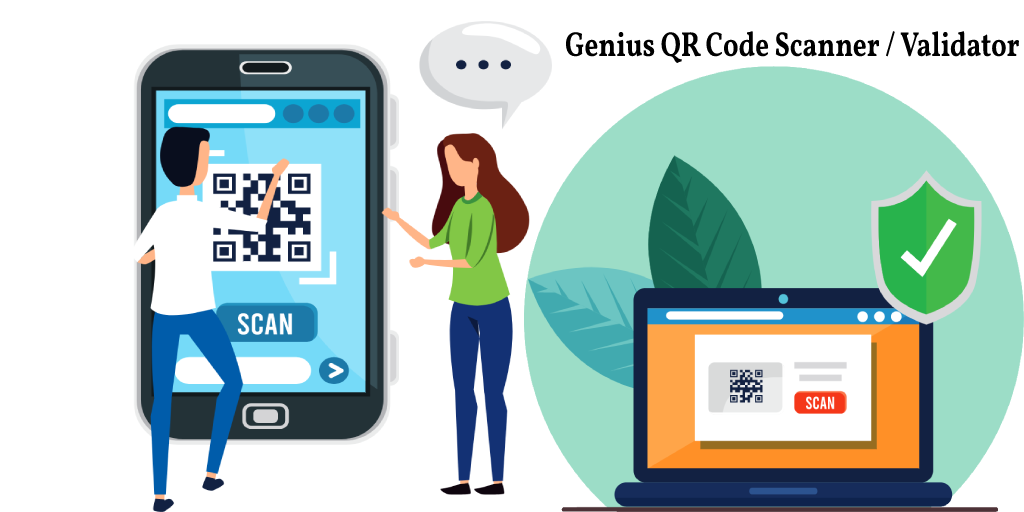
<style>
.page{position:relative;width:1024px;height:512px;background:#ffffff}
.page>*{position:absolute;margin:0}
.t1{font:34.8px "Vollkorn-Bold";color:#000000;scale:0.78 1}
</style>
<div class="page">
<p class="t1" style="left:565px;top:31px;width:455px;height:33px">Genius QR Code Scanner / Validator</p>
</div>
